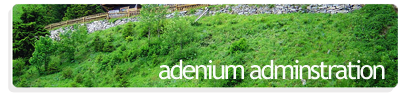
<style>
.page{position:relative;width:400px;height:100px}
.page>*{position:absolute;margin:0}
.t1{font:26.3px "TrebuchetMS";letter-spacing:-0.085em;color:#f9fcf9}
</style>
<div class="page">
<p class="t1" style="left:159px;top:59px;width:226px;height:21px">adenium adminstration</p>
</div>
